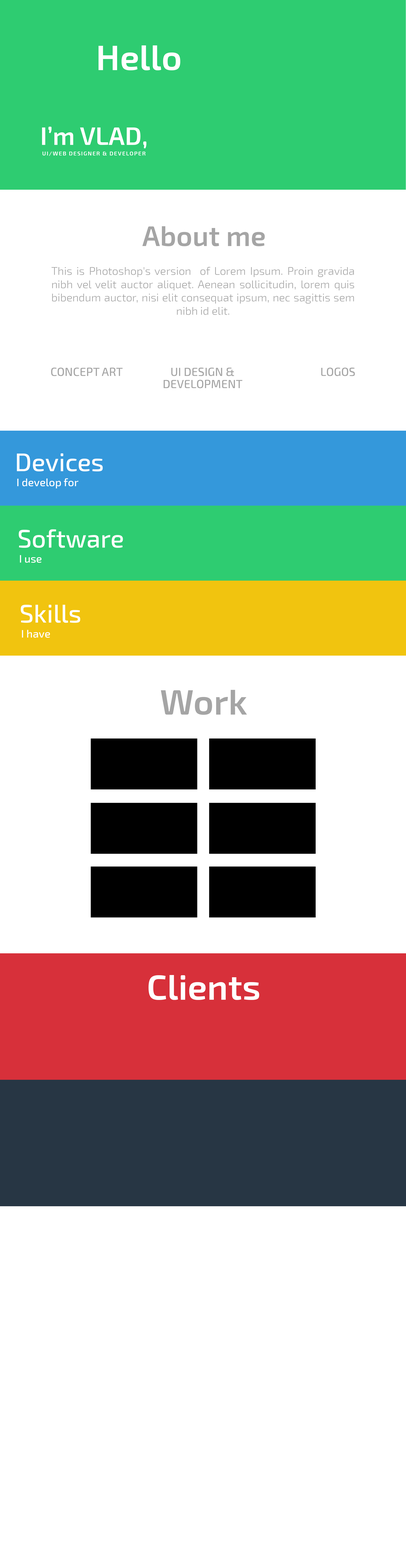
<style>
.page{position:relative;width:406px;height:1568px;background:#ffffff}
.page>*{position:absolute;margin:0}
.t1{font:35.5px "Exo2-SemiBold";color:#ffffff}
.t2{font:5.7px/10.5px "Exo2-SemiBold";letter-spacing:0.12em;color:#ffffff}
.t3{font:25.3px "Exo2-SemiBold";color:#ffffff}
.t4{font:28.1px "Exo2-SemiBold";color:#a5a5a5}
.t5{font:11.1px "Exo2-Light";color:#a5a5a5}
.t6{font:11.6px "Exo2-Medium";color:#a5a5a5}
.t7{font:11.6px/12.1px "Exo2-Medium";color:#a5a5a5}
.t8{font:25.3px "Exo2-Medium";color:#fefefe}
.t9{font:10.9px "Exo2-Medium";color:#ffffff}
.t10{font:35.5px "Exo2-SemiBold";color:#a5a5a5}
</style>
<div class="page">
<p class="t1" style="left:98px;top:45px;width:82px;height:25px">Hello</p>
<p class="t2" style="left:42px;top:127px;width:105px;height:29px"><span class="t3">I’m VLAD,<br> </span>UI/WEB DESIGNER &amp; DEVELOPER</p>
<p class="t4" style="left:142px;top:226px;width:123px;height:20px">About me</p>
<p class="t5" style="left:51px;top:267px;width:303px;height:48px;text-align:justify">This is Photoshop's version  of Lorem Ipsum. Proin gravida nibh vel velit auctor aliquet. Aenean sollicitudin, lorem quis bibendum auctor, nisi elit consequat ipsum, nec sagittis sem nibh id elit.</p>
<p class="t6" style="left:51px;top:368px;width:72px;height:8px">CONCEPT ART</p>
<p class="t7" style="left:164px;top:368px;width:78px;height:20px;text-align:center">UI DESIGN &amp;<br>DEVELOPMENT</p>
<p class="t6" style="left:321px;top:368px;width:34px;height:8px">LOGOS</p>
<p class="t8" style="left:17px;top:453px;width:86px;height:18px">Devices</p>
<p class="t9" style="left:17px;top:478px;width:61px;height:10px">I develop for</p>
<p class="t8" style="left:19px;top:529px;width:104px;height:19px">Software</p>
<p class="t9" style="left:20px;top:555px;width:22px;height:8px">I use</p>
<p class="t8" style="left:21px;top:605px;width:59px;height:18px">Skills</p>
<p class="t9" style="left:22px;top:630px;width:28px;height:8px">I have</p>
<p class="t10" style="left:161px;top:690px;width:86px;height:25px">Work</p>
<p class="t1" style="left:149px;top:975px;width:110px;height:25px">Clients</p>
</div>
